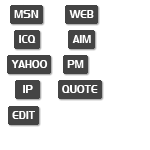
<style>
.page{position:relative;width:150px;height:150px;background:#ffffff}
.page>*{position:absolute;margin:0}
.t1{font:12px "Denmark";letter-spacing:0.025em;color:#ffffff;scale:0.75 1}
</style>
<div class="page">
<p class="t1" style="left:14px;top:10px;width:25px;height:8px">MSN</p>
<p class="t1" style="left:69px;top:10px;width:25px;height:8px">WEB</p>
<p class="t1" style="left:19px;top:35px;width:17px;height:8px">ICQ</p>
<p class="t1" style="left:72px;top:35px;width:19px;height:8px">AIM</p>
<p class="t1" style="left:11px;top:60px;width:37px;height:8px">YAHOO</p>
<p class="t1" style="left:67px;top:60px;width:17px;height:8px">PM</p>
<p class="t1" style="left:23px;top:85px;width:10px;height:8px">IP</p>
<p class="t1" style="left:62px;top:85px;width:36px;height:8px">QUOTE</p>
<p class="t1" style="left:12px;top:111px;width:23px;height:8px">EDIT</p>
</div>
